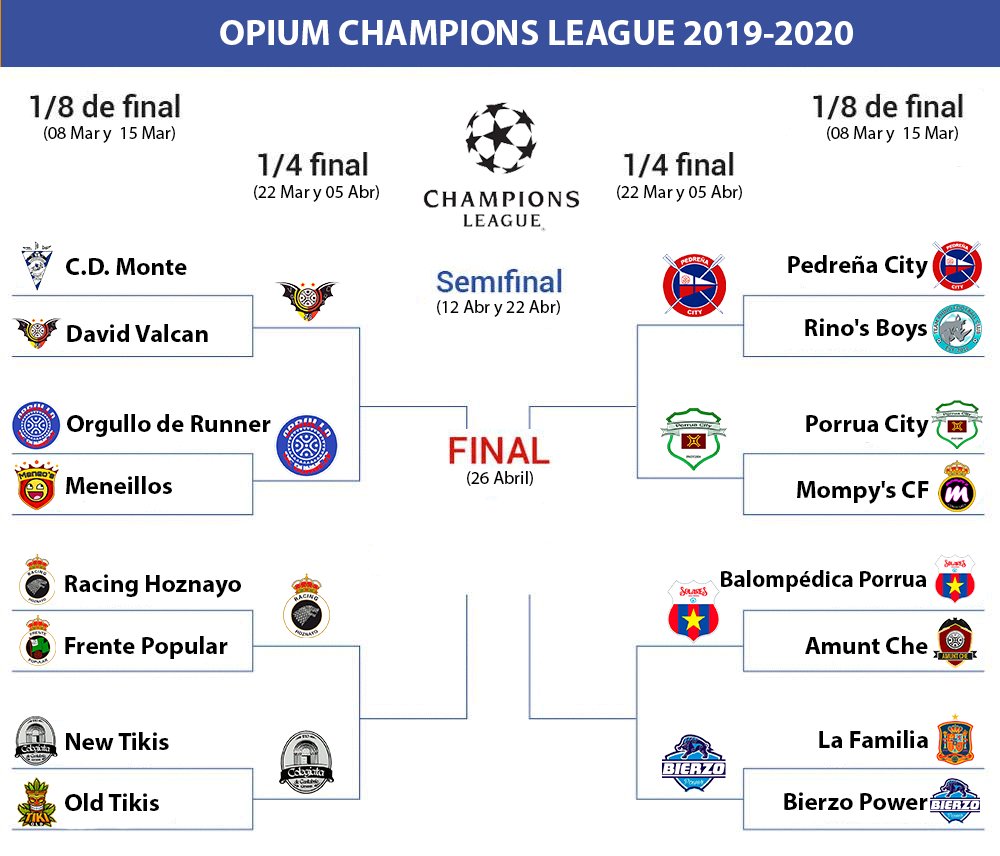
<style>
.page{position:relative;width:1000px;height:856px;background:#ffffff}
.page>*{position:absolute;margin:0}
.t1{font:36px "MyriadPro-Bold";color:#ffffff}
.t2{font:18px "MyriadPro-Regular";color:#000000}
.t3{font:25px "MyriadPro-Bold";color:#000000}
.t4{font:23px "MyriadPro-Bold";color:#000000}
</style>
<div class="page">
<p class="t1" style="left:220px;top:20px;width:633px;height:25px">OPIUM CHAMPIONS LEAGUE 2019-2020</p>
<p class="t2" style="left:44px;top:126px;width:131px;height:17px">(08 Mar y  15 Mar)</p>
<p class="t2" style="left:827px;top:126px;width:131px;height:17px">(08 Mar y  15 Mar)</p>
<p class="t2" style="left:254px;top:185px;width:125px;height:17px">(22 Mar y 05 Abr)</p>
<p class="t2" style="left:617px;top:185px;width:125px;height:17px">(22 Mar y 05 Abr)</p>
<p class="t3" style="left:788px;top:255px;width:140px;height:24px">Pedreña City</p>
<p class="t3" style="left:66px;top:258px;width:121px;height:17px">C.D. Monte</p>
<p class="t2" style="left:437px;top:300px;width:123px;height:17px">(12 Abr y 22 Abr)</p>
<p class="t3" style="left:805px;top:318px;width:122px;height:24px">Rino's Boys</p>
<p class="t3" style="left:67px;top:324px;width:141px;height:18px">David Valcan</p>
<p class="t3" style="left:67px;top:414px;width:204px;height:23px">Orgullo de Runner</p>
<p class="t3" style="left:806px;top:414px;width:123px;height:24px">Porrua City</p>
<p class="t2" style="left:467px;top:471px;width:66px;height:15px">(26 Abril)</p>
<p class="t3" style="left:66px;top:476px;width:106px;height:18px">Meneillos</p>
<p class="t3" style="left:797px;top:481px;width:132px;height:23px">Mompy's CF</p>
<p class="t3" style="left:65px;top:574px;width:176px;height:24px">Racing Hoznayo</p>
<p class="t4" style="left:721px;top:570px;width:205px;height:22px">Balompédica Porrua</p>
<p class="t3" style="left:65px;top:636px;width:163px;height:23px">Frente Popular</p>
<p class="t3" style="left:805px;top:636px;width:123px;height:18px">Amunt Che</p>
<p class="t3" style="left:66px;top:732px;width:103px;height:18px">New Tikis</p>
<p class="t3" style="left:819px;top:730px;width:109px;height:18px">La Familia</p>
<p class="t3" style="left:65px;top:793px;width:94px;height:18px">Old Tikis</p>
<p class="t3" style="left:784px;top:792px;width:144px;height:18px">Bierzo Power</p>
</div>
